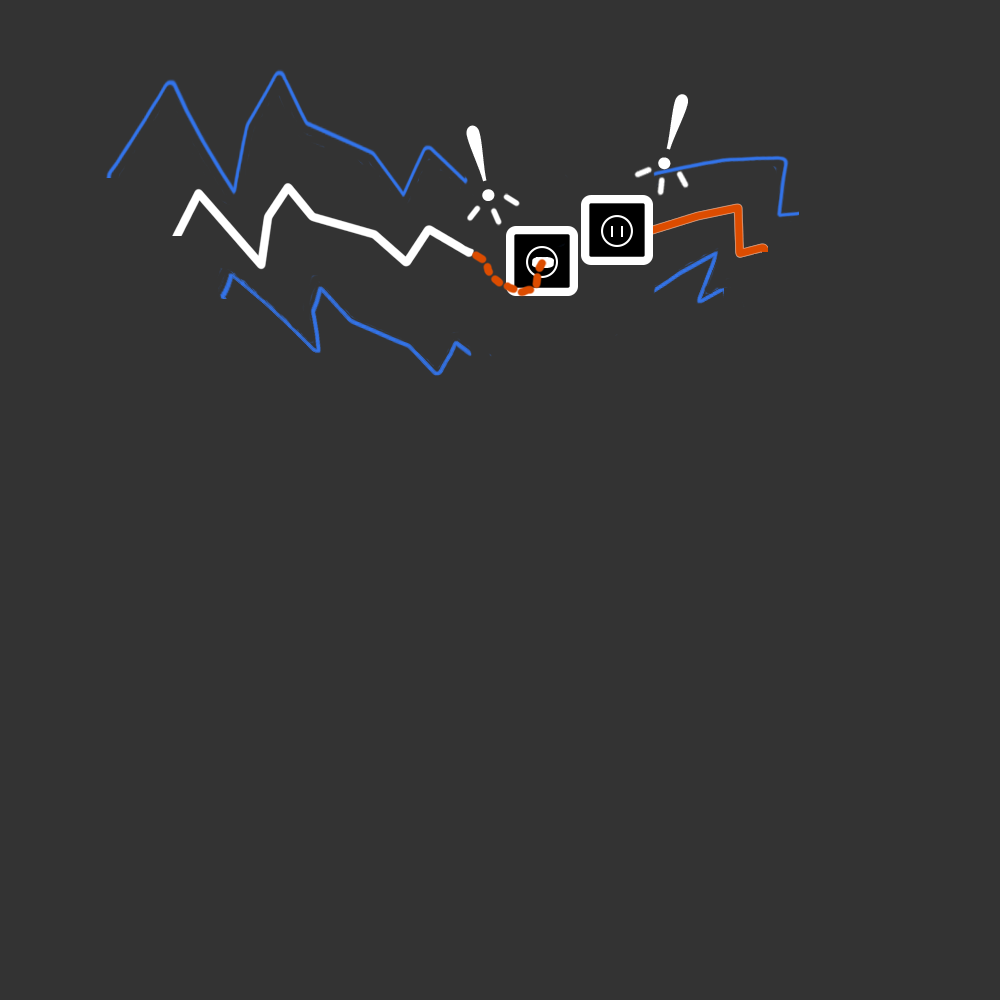
<style>
.page{position:relative;width:1000px;height:1000px;background:#333333}
.page>*{position:absolute;margin:0}
.t1{font:95.6px "BanglaMN";color:#ffffff}
</style>
<div class="page">
<p class="t1" style="left:658px;top:94px;width:30px;height:76px;rotate:16deg">!</p>
<p class="t1" style="left:466px;top:125px;width:29px;height:76px;rotate:-14deg">!</p>
</div>
